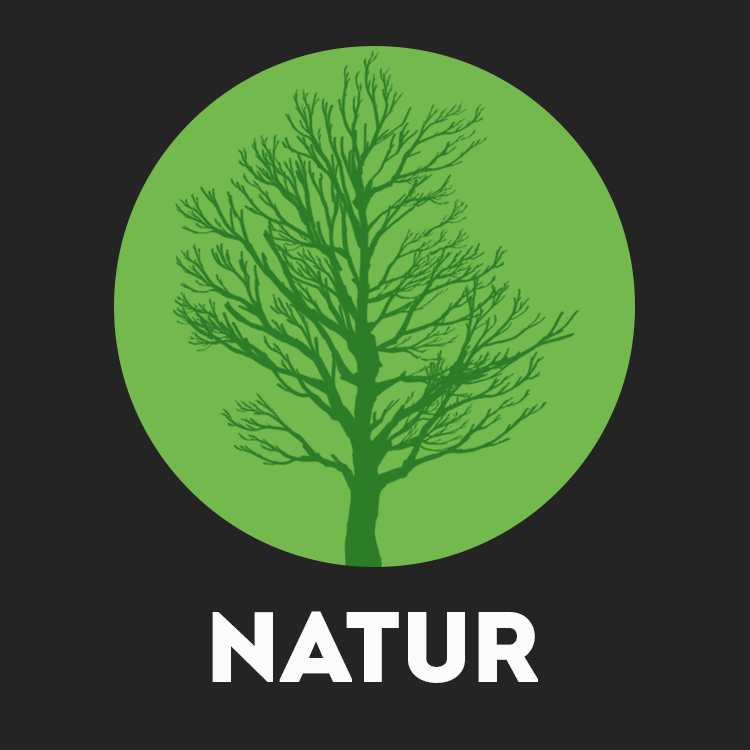
<style>
.page{position:relative;width:750px;height:750px;background:#242424}
.page>*{position:absolute;margin:0}
.t1{font:100px "Intro-Black";color:#fbfbfb}
</style>
<div class="page">
<p class="t1" style="left:212px;top:611px;width:326px;height:72px">NATUR</p>
</div>
